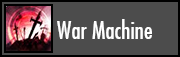
<style>
.page{position:relative;width:180px;height:57px;background:#4c4c4c}
.page>*{position:absolute;margin:0}
.t1{font:24px "FuturaCondensed";color:#ffffff}
</style>
<div class="page">
<p class="t1" style="left:57px;top:19px;width:95px;height:20px">War Machine</p>
</div>
